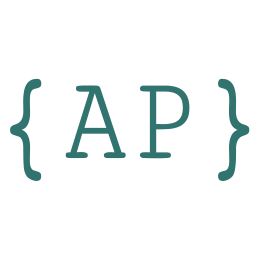
<style>
.page{position:relative;width:260px;height:260px;background:#ffffff}
.page>*{position:absolute;margin:0}
.t1{font:125px "SmallTypeWriting";color:#31736f}
</style>
<div class="page">
<p class="t1" style="left:10px;top:78px;width:240px;height:103px">{AP}</p>
</div>
